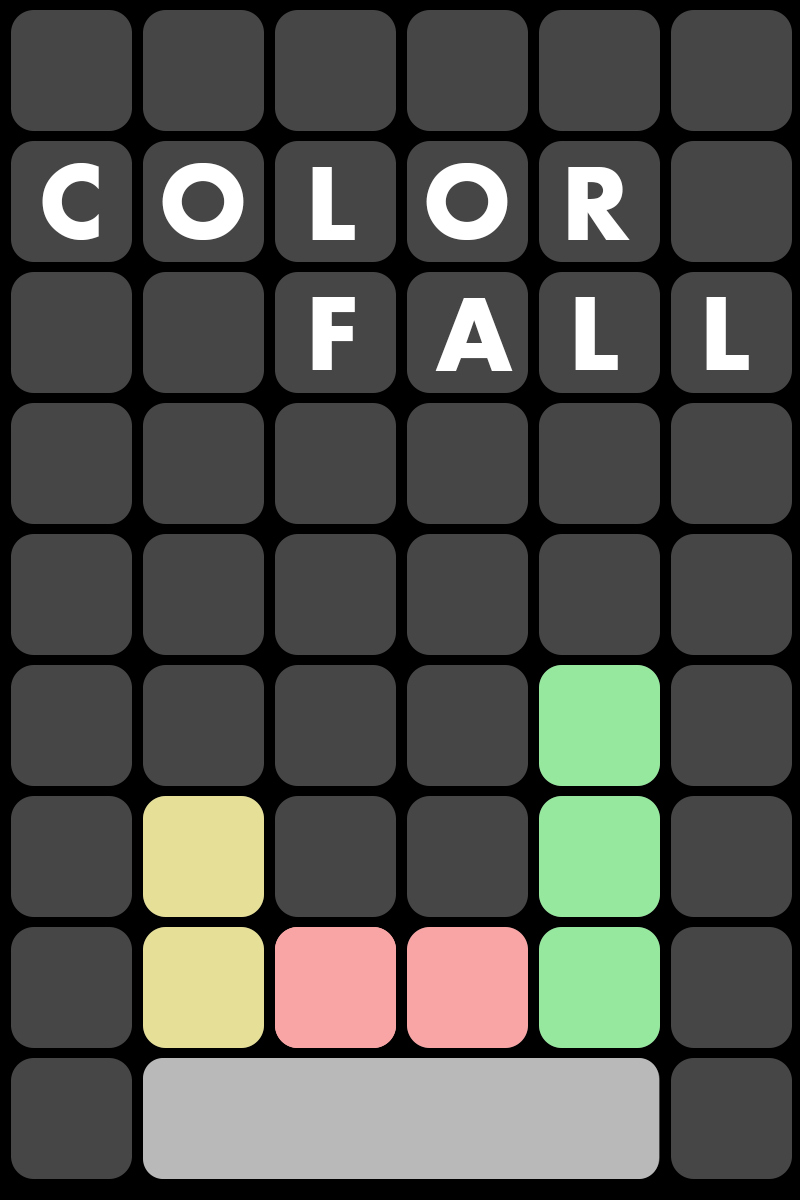
<style>
.page{position:relative;width:800px;height:1200px;background:#464646}
.page>*{position:absolute;margin:0}
.t1{font:110px "Aharoni-Bold";color:#ffffff}
</style>
<div class="page">
<p class="t1" style="left:42px;top:163px;width:57px;height:77px">C</p>
<p class="t1" style="left:162px;top:163px;width:82px;height:77px">O</p>
<p class="t1" style="left:312px;top:167px;width:43px;height:73px">L</p>
<p class="t1" style="left:426px;top:163px;width:82px;height:77px">O</p>
<p class="t1" style="left:568px;top:167px;width:62px;height:73px">R</p>
<p class="t1" style="left:312px;top:297px;width:43px;height:73px">F</p>
<p class="t1" style="left:435px;top:298px;width:78px;height:73px">A</p>
<p class="t1" style="left:575px;top:297px;width:43px;height:73px">L</p>
<p class="t1" style="left:706px;top:297px;width:43px;height:73px">L</p>
</div>
